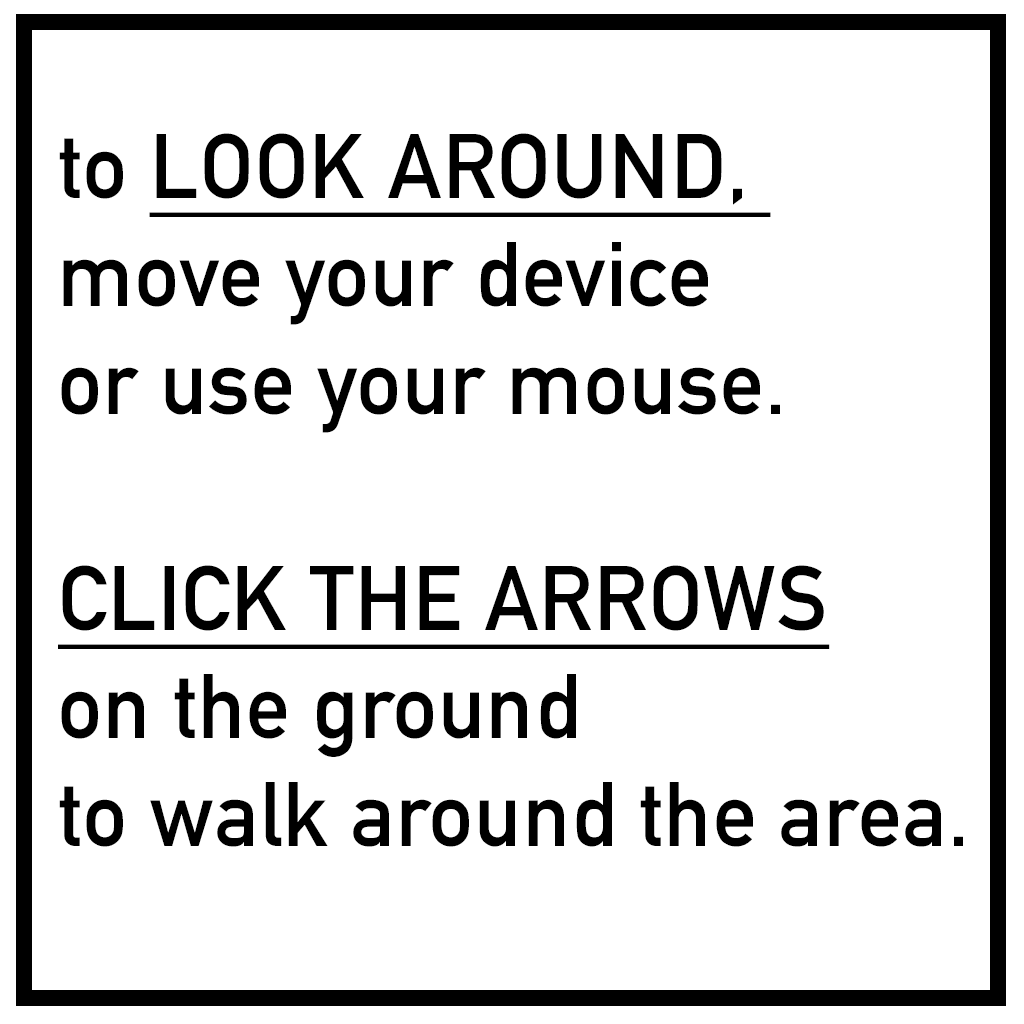
<style>
.page{position:relative;width:1024px;height:1024px;background:#ffffff}
.page>*{position:absolute;margin:0}
.t1{font:90px "DINAlternate-Bold";color:#000000}
.t2{font:72px "DINAlternate-Bold";color:#000000}
.t3{font:90px "DINAlternate-Bold";color:#000000;text-decoration:underline}
</style>
<div class="page">
<p class="t1" style="left:58px;top:133px;width:905px;height:714px"><span class="t2"><br></span>to <span class="t3">LOOK AROUND, <br></span>move your device<br>or use your mouse. <br><br><span class="t3">CLICK THE ARROWS</span> <br>on the ground <br>to walk around the area.</p>
</div>
